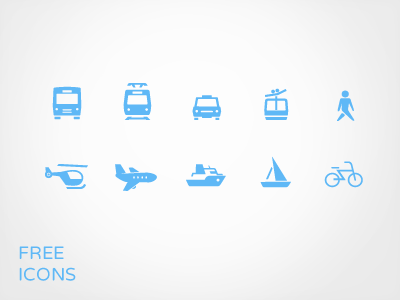
<style>
.page{position:relative;width:400px;height:300px}
.page>*{position:absolute;margin:0}
.t1{font:18px "VarelaRound-Regular";color:#5fb8f6}
</style>
<div class="page">
<p class="t1" style="left:19px;top:246px;width:57px;height:35px">FREE <br>ICONS</p>
</div>
